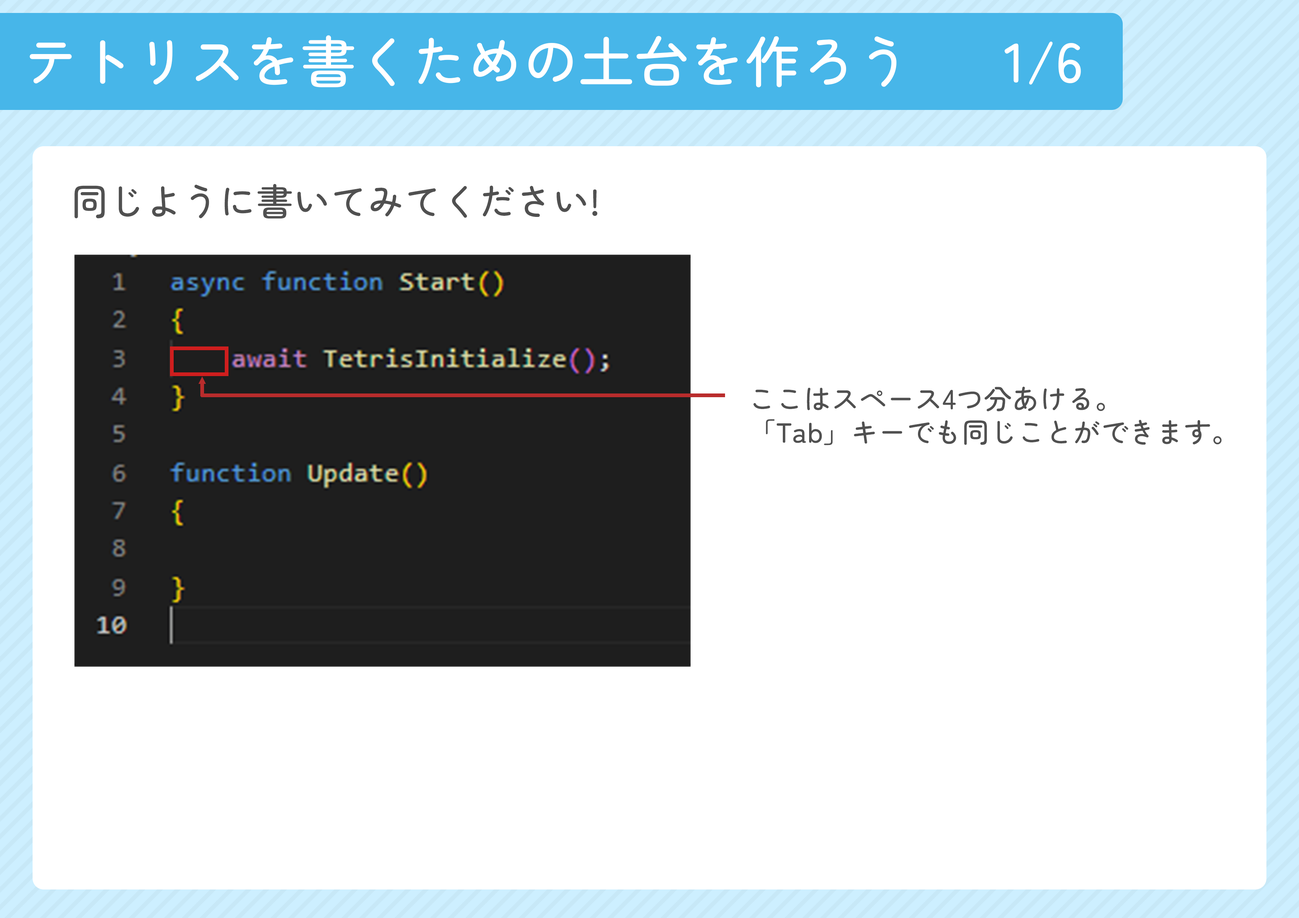
<style>
.page{position:relative;width:1299px;height:918px;background:#ffffff}
.page>*{position:absolute;margin:0}
.t1{font:55.5px "ZenMaruGothic-Medium";color:#ffffff}
.t2{font:37px "ZenMaruGothic-Medium";color:#505050}
.t3{font:27.8px "ZenMaruGothic-Medium";color:#505050}
</style>
<div class="page">
<p class="t1" style="left:30px;top:35px;width:866px;height:52px">テトリスを書くための土台を作ろう</p>
<p class="t1" style="left:1004px;top:41px;width:77px;height:44px">1/6</p>
<p class="t2" style="left:74px;top:184px;width:523px;height:35px">同じように書いてみてください!</p>
<p class="t3" style="left:753px;top:387px;width:468px;height:58px">ここはスペース4つ分あける。<br>「Tab」キーでも同じことができます。</p>
</div>
